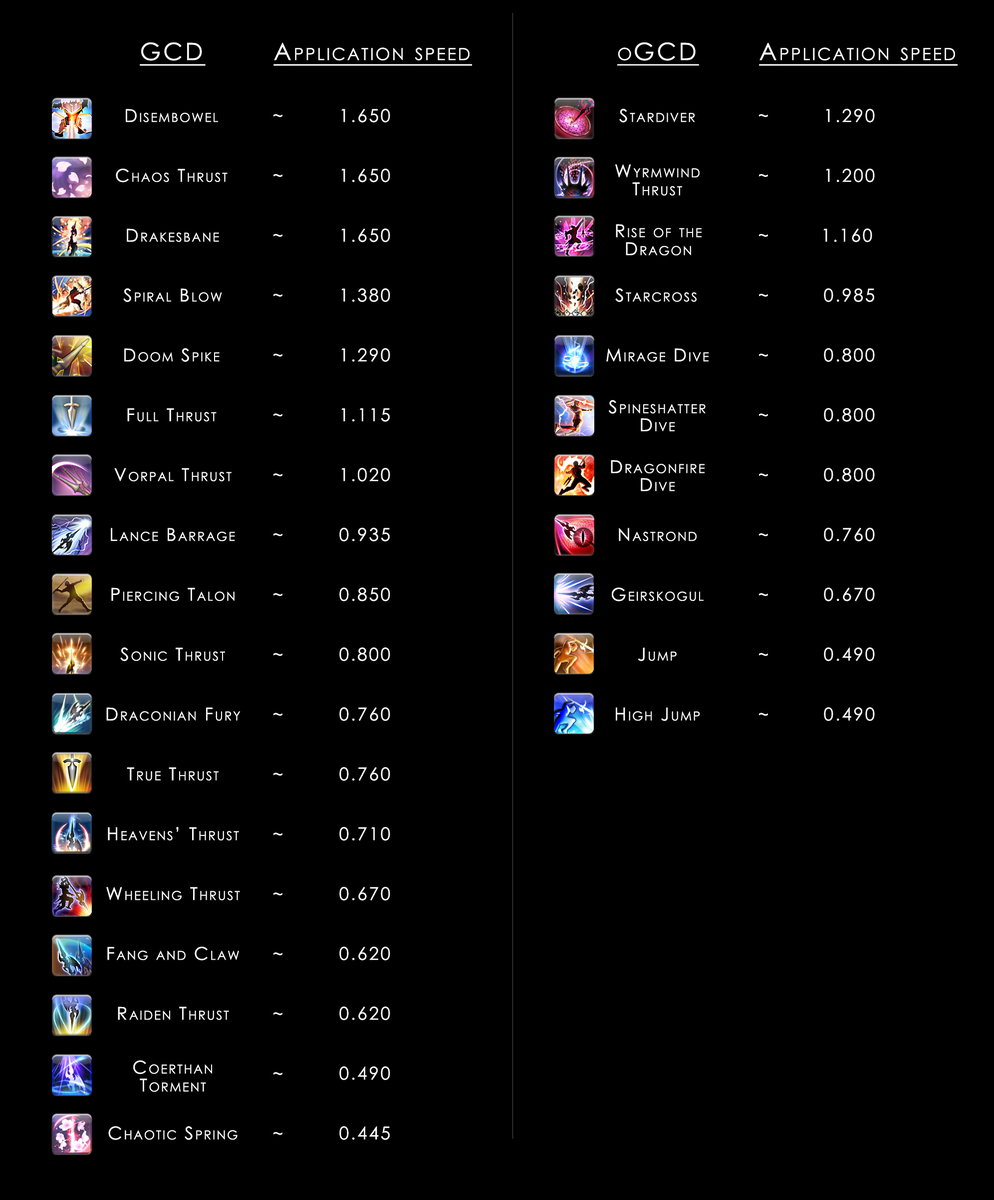
<style>
.page{position:relative;width:994px;height:1200px;background:#000000}
.page>*{position:absolute;margin:0}
.t1{font:23.9px "CenturyGothic";letter-spacing:0.1em;color:#ffffff;font-variant:small-caps;text-decoration:underline}
.t2{font:17.7px "CenturyGothic";letter-spacing:0.1em;color:#ffffff;font-variant:small-caps}
.t3{font:17.7px/8.6px "CenturyGothic";letter-spacing:0.1em;color:#ffffff;font-variant:small-caps}
.t4{font:17.7px/18px "CenturyGothic";letter-spacing:0.1em;color:#ffffff;font-variant:small-caps}
</style>
<div class="page">
<p class="t1" style="left:140px;top:42px;width:66px;height:24px">GCD</p>
<p class="t1" style="left:273px;top:42px;width:199px;height:24px">Application speed</p>
<p class="t1" style="left:617px;top:42px;width:82px;height:24px">oGCD</p>
<p class="t1" style="left:759px;top:42px;width:198px;height:24px">Application speed</p>
<p class="t2" style="left:126px;top:109px;width:92px;height:13px">Disembowel</p>
<p class="t2" style="left:341px;top:109px;width:49px;height:14px">1.650</p>
<p class="t2" style="left:619px;top:109px;width:76px;height:14px">Stardiver</p>
<p class="t2" style="left:826px;top:109px;width:48px;height:14px">1.290</p>
<p class="t3" style="left:273px;top:114px;width:9px;height:1021px;text-align:center">~<br><br><br><br><br><br><br>~<br><br><br><br><br><br><br>~<br><br><br><br><br><br><br>~<br><br><br><br><br><br><br>~<br><br><br><br><br><br><br>~<br><br><br><br><br><br><br>~<br><br><br><br><br><br><br>~<br><br><br><br><br><br><br>~<br><br><br><br><br><br><br>~<br><br><br><br><br><br><br>~<br><br><br><br><br><br><br>~<br><br><br><br><br><br><br>~<br><br><br><br><br><br><br>~<br><br><br><br><br><br><br>~<br><br><br><br><br><br><br>~<br><br><br><br><br><br><br>~<br><br><br><br><br><br><br>~</p>
<p class="t3" style="left:759px;top:114px;width:9px;height:602px;text-align:center">~<br><br><br><br><br><br><br>~<br><br><br><br><br><br><br>~<br><br><br><br><br><br><br>~<br><br><br><br><br><br><br>~<br><br><br><br><br><br><br>~<br><br><br><br><br><br><br>~<br><br><br><br><br><br><br>~<br><br><br><br><br><br><br>~<br><br><br><br><br><br><br>~<br><br><br><br><br><br><br>~</p>
<p class="t2" style="left:116px;top:169px;width:111px;height:14px">Chaos Thrust</p>
<p class="t2" style="left:341px;top:169px;width:49px;height:14px">1.650</p>
<p class="t4" style="left:615px;top:164px;width:84px;height:32px;text-align:center">Wyrmwind<br>Thrust</p>
<p class="t2" style="left:826px;top:169px;width:48px;height:14px">1.200</p>
<p class="t2" style="left:127px;top:228px;width:92px;height:14px">Drakesbane</p>
<p class="t2" style="left:341px;top:228px;width:49px;height:14px">1.650</p>
<p class="t4" style="left:616px;top:224px;width:85px;height:31px;text-align:center">Rise of the<br>Dragon</p>
<p class="t2" style="left:823px;top:228px;width:49px;height:14px">1.160</p>
<p class="t2" style="left:123px;top:288px;width:99px;height:14px">Spiral Blow</p>
<p class="t2" style="left:341px;top:288px;width:49px;height:14px">1.380</p>
<p class="t2" style="left:615px;top:288px;width:81px;height:14px">Starcross</p>
<p class="t2" style="left:824px;top:288px;width:50px;height:14px">0.985</p>
<p class="t2" style="left:124px;top:348px;width:95px;height:14px">Doom Spike</p>
<p class="t2" style="left:341px;top:348px;width:49px;height:14px">1.290</p>
<p class="t2" style="left:606px;top:348px;width:103px;height:14px">Mirage Dive</p>
<p class="t2" style="left:824px;top:348px;width:50px;height:14px">0.800</p>
<p class="t4" style="left:609px;top:400px;width:96px;height:31px;text-align:center">Spineshatter<br>Dive</p>
<p class="t2" style="left:127px;top:408px;width:89px;height:13px">Full Thrust</p>
<p class="t2" style="left:341px;top:408px;width:49px;height:14px">1.115</p>
<p class="t2" style="left:824px;top:408px;width:50px;height:14px">0.800</p>
<p class="t4" style="left:611px;top:460px;width:93px;height:31px;text-align:center">Dragonfire<br>Dive</p>
<p class="t2" style="left:114px;top:468px;width:117px;height:13px">Vorpal Thrust</p>
<p class="t2" style="left:341px;top:468px;width:49px;height:14px">1.020</p>
<p class="t2" style="left:824px;top:468px;width:50px;height:14px">0.800</p>
<p class="t2" style="left:111px;top:528px;width:124px;height:13px">Lance Barrage</p>
<p class="t2" style="left:339px;top:528px;width:51px;height:14px">0.935</p>
<p class="t2" style="left:619px;top:528px;width:77px;height:13px">Nastrond</p>
<p class="t2" style="left:824px;top:528px;width:50px;height:14px">0.760</p>
<p class="t2" style="left:111px;top:588px;width:123px;height:13px">Piercing Talon</p>
<p class="t2" style="left:339px;top:588px;width:51px;height:14px">0.850</p>
<p class="t2" style="left:612px;top:588px;width:91px;height:14px">Geirskogul</p>
<p class="t2" style="left:824px;top:588px;width:50px;height:14px">0.670</p>
<p class="t2" style="left:120px;top:647px;width:105px;height:14px">Sonic Thrust</p>
<p class="t2" style="left:339px;top:647px;width:51px;height:14px">0.800</p>
<p class="t2" style="left:638px;top:647px;width:38px;height:14px">Jump</p>
<p class="t2" style="left:824px;top:647px;width:50px;height:14px">0.490</p>
<p class="t2" style="left:106px;top:707px;width:134px;height:14px">Draconian Fury</p>
<p class="t2" style="left:339px;top:707px;width:51px;height:14px">0.760</p>
<p class="t2" style="left:616px;top:707px;width:84px;height:14px">High Jump</p>
<p class="t2" style="left:824px;top:707px;width:50px;height:14px">0.490</p>
<p class="t2" style="left:127px;top:767px;width:91px;height:14px">True Thrust</p>
<p class="t2" style="left:339px;top:767px;width:51px;height:14px">0.760</p>
<p class="t2" style="left:108px;top:827px;width:131px;height:13px">Heavens’ Thrust</p>
<p class="t2" style="left:339px;top:827px;width:51px;height:14px">0.710</p>
<p class="t2" style="left:106px;top:887px;width:134px;height:13px">Wheeling Thrust</p>
<p class="t2" style="left:339px;top:887px;width:51px;height:14px">0.670</p>
<p class="t2" style="left:107px;top:947px;width:132px;height:14px">Fang and Claw</p>
<p class="t2" style="left:339px;top:947px;width:51px;height:14px">0.620</p>
<p class="t2" style="left:118px;top:1007px;width:111px;height:13px">Raiden Thrust</p>
<p class="t2" style="left:339px;top:1007px;width:51px;height:14px">0.620</p>
<p class="t4" style="left:133px;top:1060px;width:79px;height:32px;text-align:center">Coerthan<br>Torment</p>
<p class="t2" style="left:339px;top:1066px;width:51px;height:14px">0.490</p>
<p class="t2" style="left:108px;top:1126px;width:129px;height:14px">Chaotic Spring</p>
<p class="t2" style="left:339px;top:1126px;width:51px;height:14px">0.445</p>
</div>
